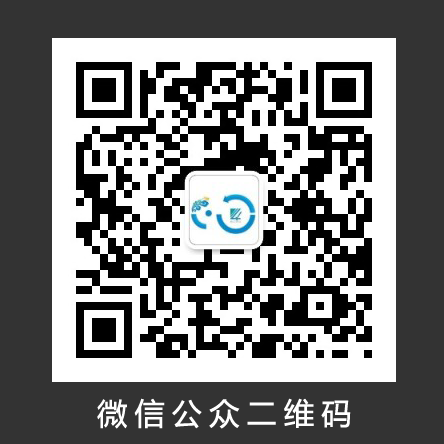
<style>
.page{position:relative;width:444px;height:444px;background:#333333}
.page>*{position:absolute;margin:0}
.t1{font:30px "MicrosoftYaHei";letter-spacing:0.22em;color:#ffffff;font-weight:bold}
</style>
<div class="page">
<p class="t1" style="left:97px;top:398px;width:254px;height:31px">微信公众二维码</p>
</div>
